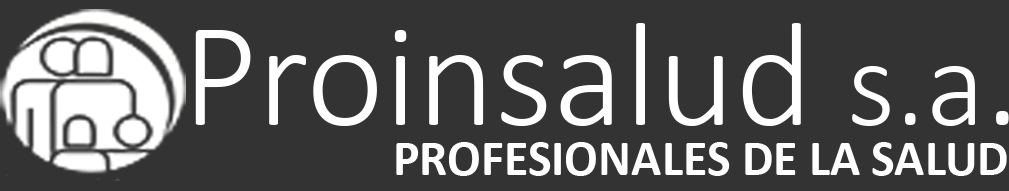
<style>
.page{position:relative;width:1009px;height:191px;background:#333333}
.page>*{position:absolute;margin:0}
.t1{font:150px "Calibri-Light";color:#ffffff}
.t2{font:125px "Calibri-Light";color:#ffffff}
.t3{font:50px "Calibri-Bold";color:#ffffff}
</style>
<div class="page">
<p class="t1" style="left:195px;top:23px;width:814px;height:103px">Proinsalud <span class="t2">s.a</span>.</p>
<p class="t3" style="left:396px;top:142px;width:611px;height:34px">PROFESIONALES DE LA SALUD</p>
</div>
